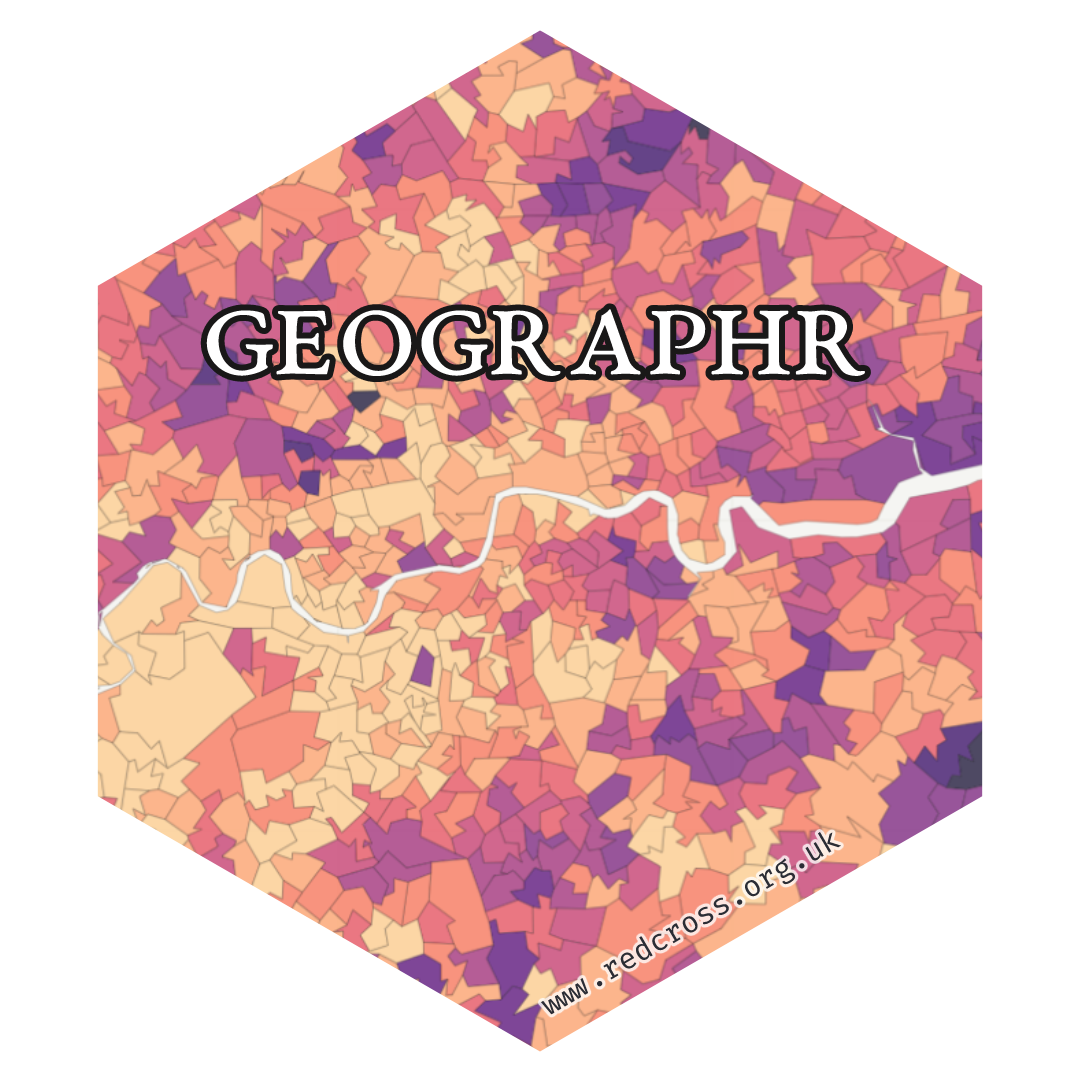
<style>
.page{position:relative;width:1080px;height:1080px;background:#ffffff}
.page>*{position:absolute;margin:0}
.t1{font:140px "EBGaramond12-AllSC";color:#ffffff}
.t2{font:30px "FiraCode-Regular";color:#2b2d35}
</style>
<div class="page">
<p class="t1" style="left:206px;top:309px;width:660px;height:68px">Geographr</p>
<p class="t2" style="left:540px;top:831px;width:302px;height:184px;rotate:-30deg">www.redcross.org.uk</p>
</div>
